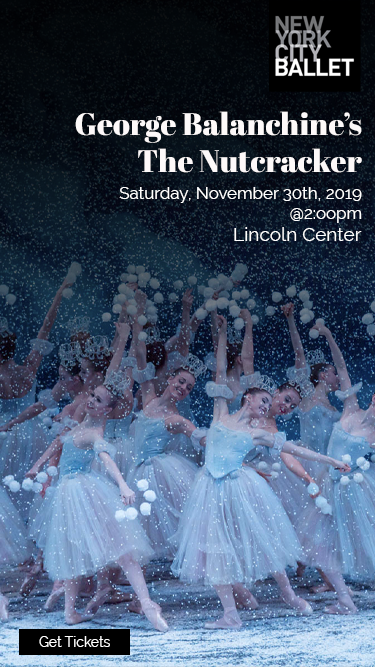
<style>
.page{position:relative;width:375px;height:667px}
.page>*{position:absolute;margin:0}
.t1{font:31.1px "AbrilFatface-Regular";color:#fdf9f9}
.t2{font:16.9px "Raleway-Regular";color:#ffffff}
.t3{font:19px "Raleway-Regular";color:#ffffff}
.t4{font:13.9px "Raleway-Regular";color:#ffffff}
</style>
<div class="page">
<p class="t1" style="left:75px;top:111px;width:287px;height:62px;text-align:right">George Balanchine’s<br>The Nutcracker</p>
<p class="t2" style="left:119px;top:187px;width:243px;height:36px;text-align:right">Saturday, November 30th, 2019<br>@2:oopm</p>
<p class="t3" style="left:234px;top:227px;width:128px;height:14px">Lincoln Center</p>
<p class="t4" style="left:39px;top:636px;width:71px;height:11px">Get Tickets</p>
</div>
